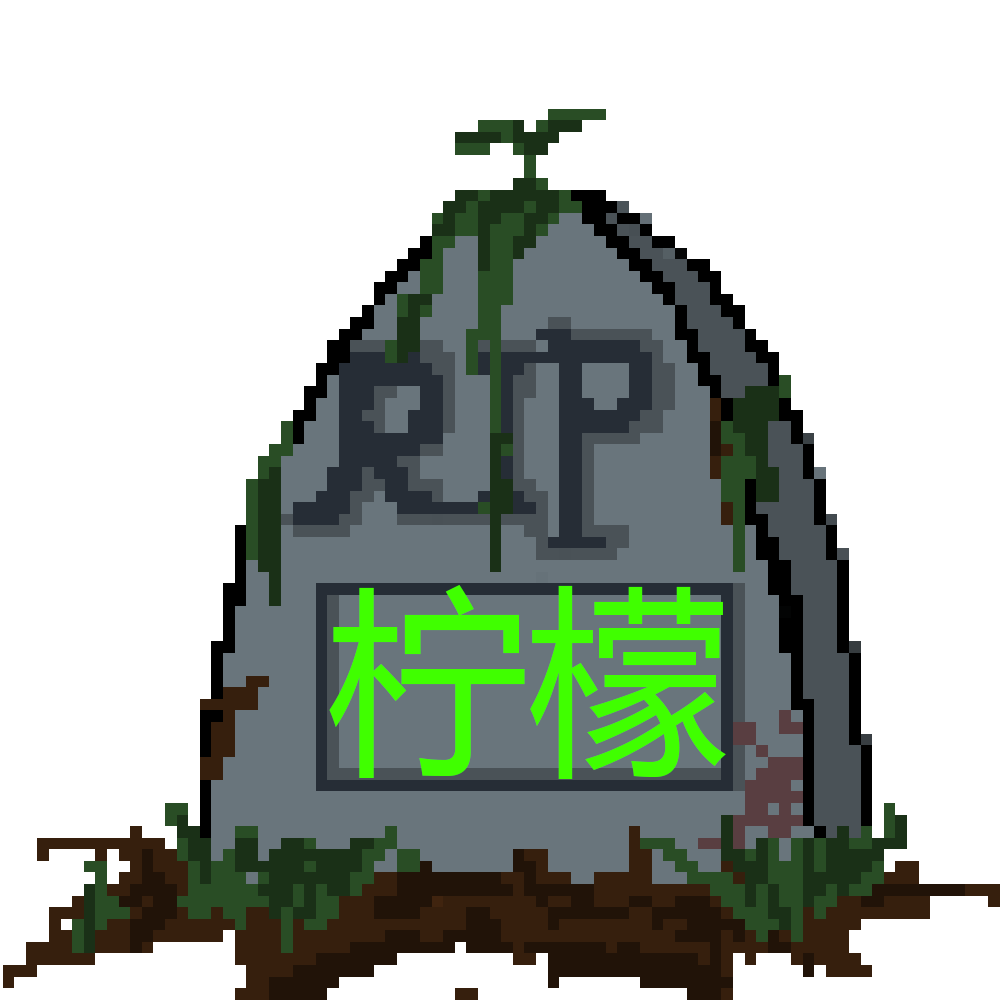
<style>
.page{position:relative;width:1000px;height:1000px;background:#ffffff}
.page>*{position:absolute;margin:0}
.t1{font:200px "MicrosoftYaHei";color:#40ff00}
</style>
<div class="page">
<p class="t1" style="left:329px;top:584px;width:397px;height:195px">柠檬</p>
</div>
